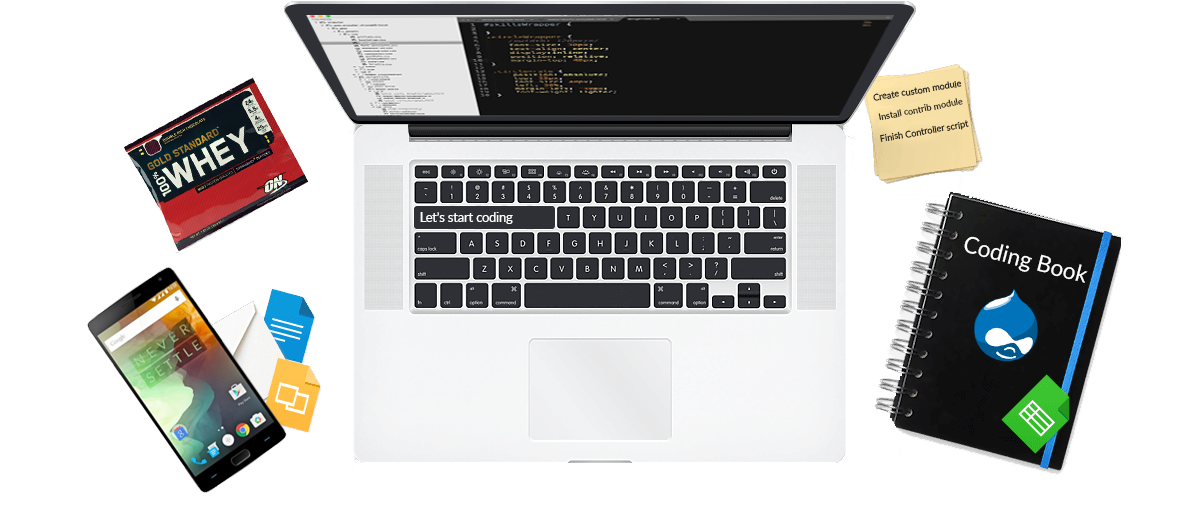
<style>
.page{position:relative;width:1200px;height:513px;background:#ffffff}
.page>*{position:absolute;margin:0}
.t1{font:9px "Lato-Regular"}
.t2{font:12.5px "Lato-Regular";color:#ffffff}
.t3{font:22.5px "Lato-Regular";color:#ffffff}
</style>
<div class="page">
<p class="t1" style="left:873px;top:80px;width:89px;height:21px;rotate:-9deg">Create custom module</p>
<p class="t1" style="left:878px;top:98px;width:85px;height:22px;rotate:-11deg">Install contrib module</p>
<p class="t1" style="left:880px;top:120px;width:89px;height:22px;rotate:-10deg">Finish Controller script</p>
<p class="t2" style="left:420px;top:212px;width:93px;height:12px">Let’s start coding</p>
<p class="t3" style="left:964px;top:236px;width:124px;height:47px;rotate:14deg">Coding Book</p>
</div>
